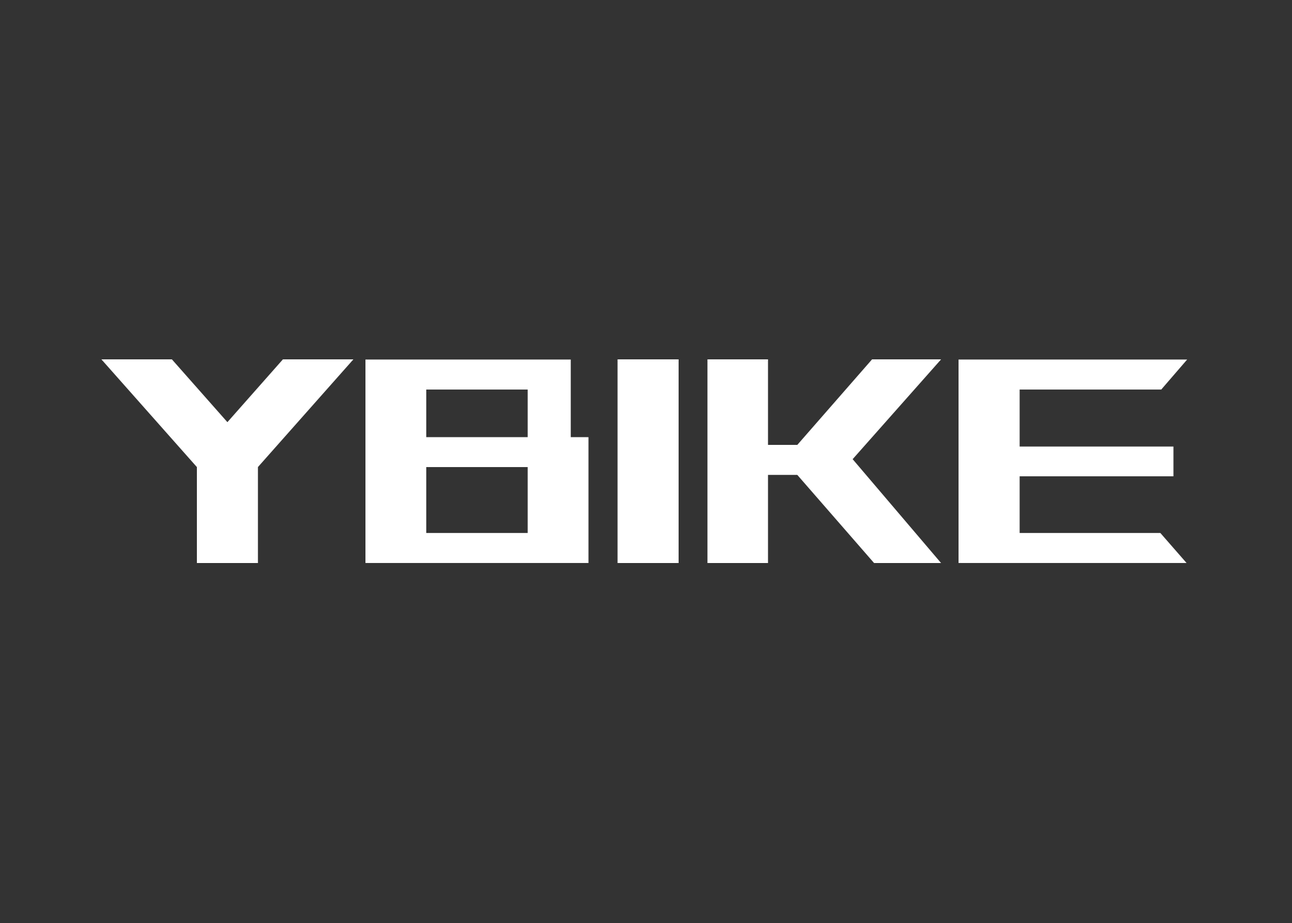
<style>
.page{position:relative;width:1292px;height:923px;background:#333333}
.page>*{position:absolute;margin:0}
.t1{font:290.9px "ROGFonts-Regular";color:#ffffff}
</style>
<div class="page">
<p class="t1" style="left:102px;top:359px;width:1085px;height:204px">YBIKE</p>
</div>
